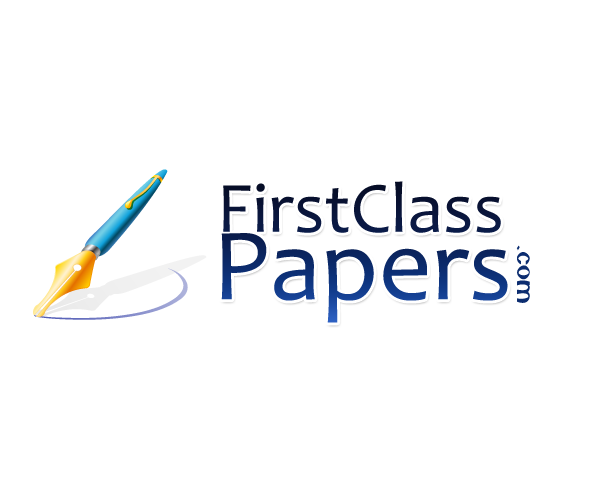
<style>
.page{position:relative;width:600px;height:480px;background:#ffffff}
.page>*{position:absolute;margin:0}
.t1{font:72.8px "Candara"}
.t2{font:103.8px/67.5px "Candara"}
.t3{font:27.3px "Camberic";color:#0c2d70}
</style>
<div class="page">
<p class="t1" style="left:221px;top:181px;width:287px;height:142px">FirstClass<br><span class="t2">Papers</span></p>
<p class="t3" style="left:516px;top:245px;width:14px;height:58px;rotate:90deg">.com</p>
</div>
